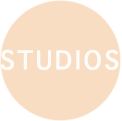
<style>
.page{position:relative;width:122px;height:121px;background:#f9ddc2}
.page>*{position:absolute;margin:0}
.t1{font:24px "Thonburi";letter-spacing:0.1em;color:#fdfcfb;font-weight:bold}
</style>
<div class="page">
<p class="t1" style="left:0px;top:49px;width:119px;height:21px">STUDIOS</p>
</div>
